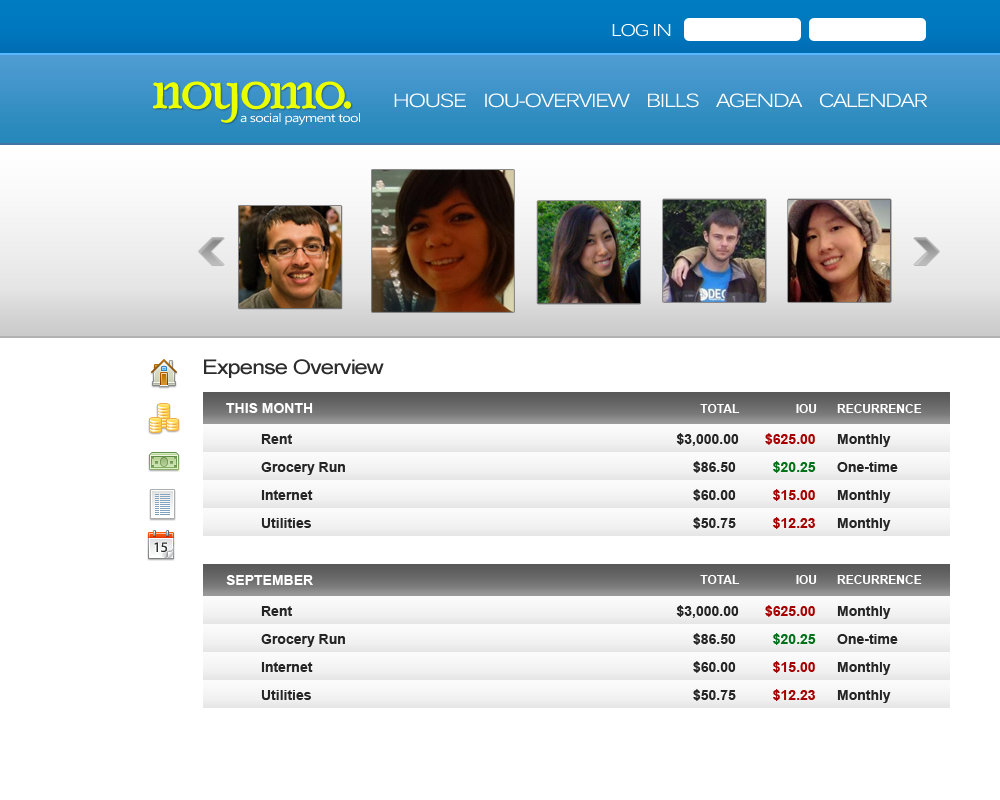
<style>
.page{position:relative;width:1000px;height:800px;background:#ffffff}
.page>*{position:absolute;margin:0}
.t1{font:16.8px "Kalinga";letter-spacing:-0.075em;color:#ffffff;scale:1.19 1}
.t2{font:76px "PoorRichard-Regular";letter-spacing:-0.045em;color:#eaff00;scale:0.94 1}
.t3{font:18.8px "Kalinga";letter-spacing:-0.075em;color:#ffffff;scale:1.19 1}
.t4{font:12.1px "Ebrima";letter-spacing:-0.05em;color:#ffffff;scale:1.19 1}
.t5{font:20.1px "ArialMT";letter-spacing:-0.05em;color:#2d2d2d;scale:1.19 1}
.t6{font:14px "Arial-BoldMT";color:#ffffff}
.t7{font:12px "Arial-BoldMT";color:#ffffff}
.t8{font:14px/28px "Arial-BoldMT";color:#252525}
.t9{font:14px/28px "Arial-BoldMT";color:#a60000}
.t10{font:14px/28px "Arial-BoldMT";color:#037119}
</style>
<div class="page">
<p class="t1" style="left:612px;top:24px;width:59px;height:13px">LOG IN</p>
<p class="t2" style="left:153px;top:81px;width:198px;height:42px">noyomo.</p>
<p class="t3" style="left:394px;top:93px;width:533px;height:15px">HOUSE    IOU-OVERVIEW    BILLS    AGENDA    CALENDAR</p>
<p class="t4" style="left:240px;top:113px;width:120px;height:12px">a social payment tool</p>
<p class="t5" style="left:204px;top:359px;width:180px;height:19px">Expense Overview</p>
<p class="t6" style="left:226px;top:403px;width:87px;height:10px">THIS MONTH</p>
<p class="t7" style="left:700px;top:404px;width:222px;height:9px">TOTAL         IOU      RECURRENCE</p>
<p class="t8" style="left:261px;top:433px;width:637px;height:98px">Rent                $3,000.00 <span class="t9">$625.00 </span>Monthly<br>Grocery Run          $86.50   <span class="t10">$20.25 </span>One-time<br>Internet           $60.00   <span class="t9">$15.00 </span>Monthly<br>Utilities           $50.75   <span class="t9">$12.23 </span>Monthly</p>
<p class="t6" style="left:226px;top:575px;width:87px;height:10px">SEPTEMBER</p>
<p class="t7" style="left:700px;top:575px;width:222px;height:9px">TOTAL         IOU      RECURRENCE</p>
<p class="t8" style="left:261px;top:605px;width:637px;height:98px">Rent                $3,000.00 <span class="t9">$625.00 </span>Monthly<br>Grocery Run          $86.50   <span class="t10">$20.25 </span>One-time<br>Internet           $60.00   <span class="t9">$15.00 </span>Monthly<br>Utilities           $50.75   <span class="t9">$12.23 </span>Monthly</p>
</div>
